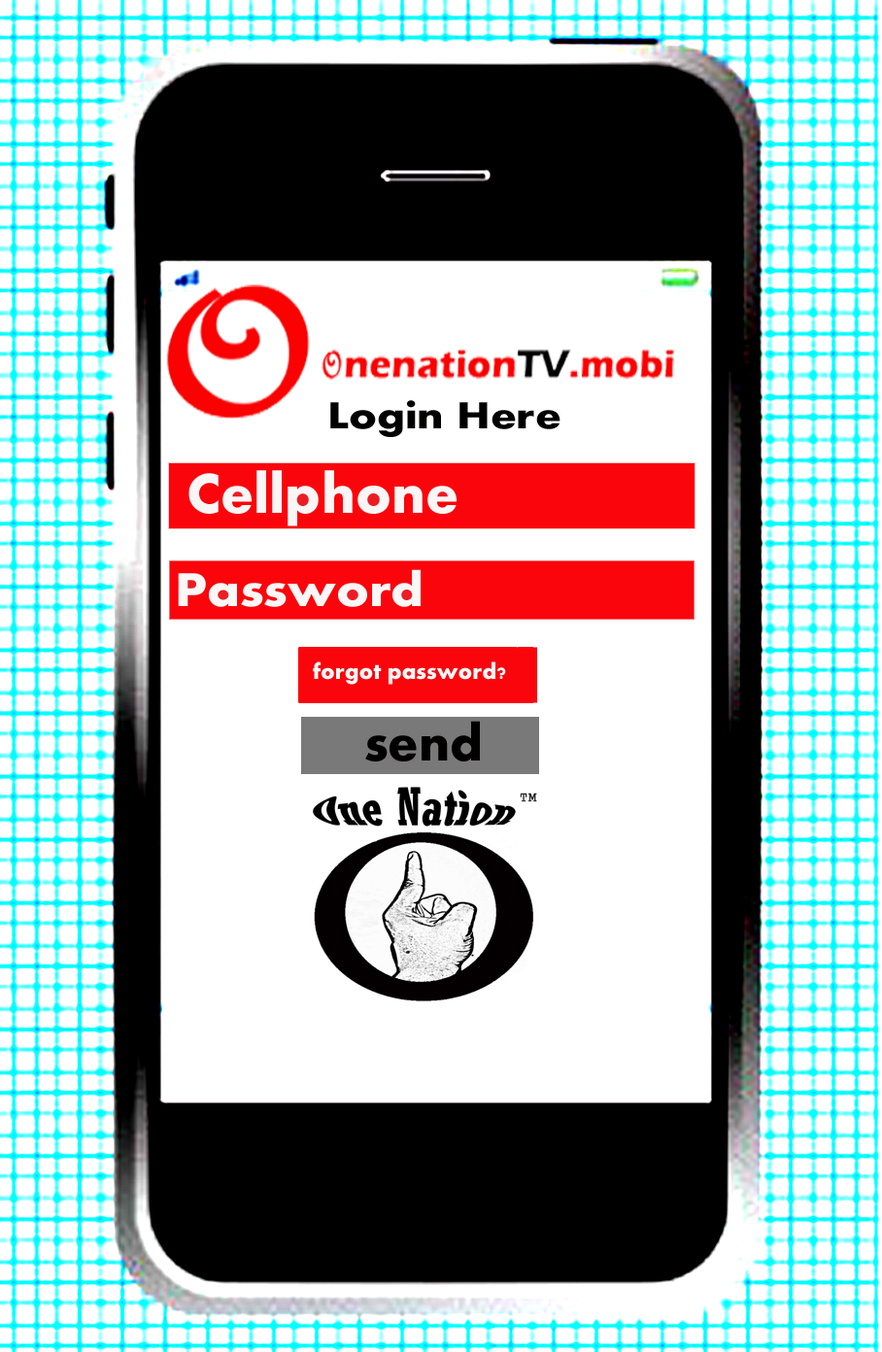
<style>
.page{position:relative;width:882px;height:1352px;background:#ffffff}
.page>*{position:absolute;margin:0}
.t1{font:39.1px "Aharoni-Bold";color:#030000;scale:1.17 1}
.t2{font:58.1px "Aharoni-Bold";color:#faf6f6}
.t3{font:49.3px "Aharoni-Bold";color:#fbf7f7;scale:1.08 1}
.t4{font:23.2px "Aharoni-Bold";color:#fbf7f7}
.t5{font:53.3px "Aharoni-Bold";color:#030000}
</style>
<div class="page">
<p class="t1" style="left:330px;top:400px;width:230px;height:37px">Login Here</p>
<p class="t2" style="left:188px;top:470px;width:269px;height:56px">Cellphone</p>
<p class="t3" style="left:178px;top:569px;width:243px;height:38px">Password</p>
<p class="t4" style="left:313px;top:661px;width:193px;height:24px">forgot password?</p>
<p class="t5" style="left:365px;top:721px;width:115px;height:41px">send</p>
</div>
